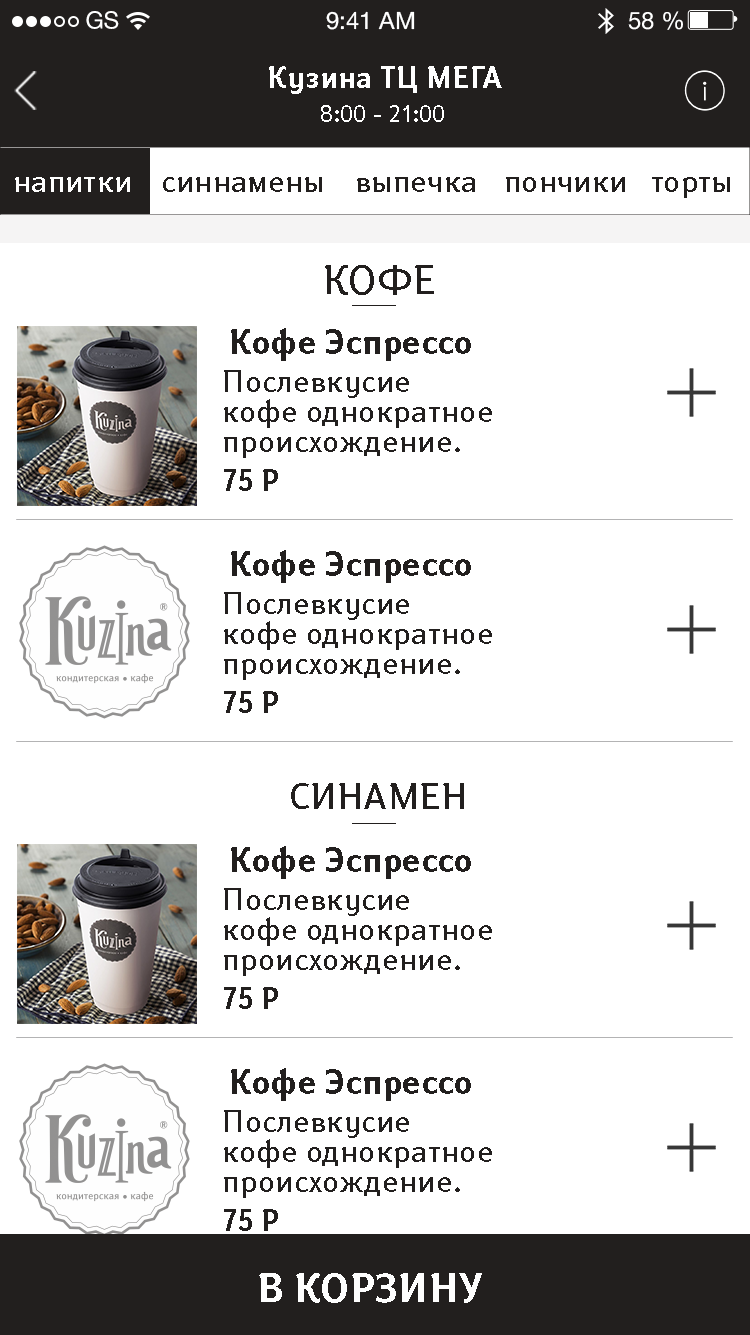
<style>
.page{position:relative;width:750px;height:1335px;background:#ffffff}
.page>*{position:absolute;margin:0}
.t1{font:24px "HelveticaNeueCyr-Roman";color:#ffffff}
.t2{font:30px "SusanBold-Regular";letter-spacing:0.012em;color:#ffffff}
.t3{font:24px "SusanBook-Regular";letter-spacing:0.012em;color:#ffffff}
.t4{font:30px "SusanBook-Regular";letter-spacing:0.012em;color:#fefefe}
.t5{font:30px "SusanBook-Regular";letter-spacing:0.012em;color:#221f1e}
.t6{font:40px "SusanBook-Regular";letter-spacing:0.012em;color:#221f1e}
.t7{font:34px "SusanBold-Regular";letter-spacing:0.012em;color:#221f1e}
.t8{font:30px/30px "SusanBook-Regular";letter-spacing:0.012em;color:#221f1e}
.t9{font:30px "SusanBold-Regular";letter-spacing:0.012em;color:#221f1e}
.t10{font:36px "SusanBook-Regular";letter-spacing:0.012em;color:#221f1e}
.t11{font:40px "SusanBold-Regular";letter-spacing:0.012em;color:#fefefe}
</style>
<div class="page">
<p class="t1" style="left:86px;top:11px;width:33px;height:18px">GS</p>
<p class="t1" style="left:326px;top:11px;width:89px;height:19px">9:41 AM</p>
<p class="t1" style="left:628px;top:11px;width:55px;height:19px">58 %</p>
<p class="t2" style="left:269px;top:66px;width:233px;height:28px">Кузина ТЦ МЕГА</p>
<p class="t3" style="left:321px;top:105px;width:123px;height:17px">8:00 - 21:00</p>
<p class="t4" style="left:15px;top:177px;width:115px;height:15px">напитки</p>
<p class="t5" style="left:163px;top:177px;width:159px;height:15px">синнамены</p>
<p class="t5" style="left:357px;top:177px;width:118px;height:15px">выпечка</p>
<p class="t5" style="left:506px;top:177px;width:119px;height:15px">пончики</p>
<p class="t5" style="left:652px;top:177px;width:78px;height:21px">торты</p>
<p class="t6" style="left:325px;top:265px;width:109px;height:30px">КОФЕ</p>
<p class="t7" style="left:231px;top:328px;width:240px;height:33px">Кофе Эспрессо</p>
<p class="t8" style="left:224px;top:370px;width:268px;height:88px">Послевкусие кофе однократное происхождение.</p>
<p class="t9" style="left:224px;top:469px;width:54px;height:22px">75 Р</p>
<p class="t7" style="left:231px;top:550px;width:240px;height:33px">Кофе Эспрессо</p>
<p class="t8" style="left:224px;top:592px;width:268px;height:88px">Послевкусие кофе однократное происхождение.</p>
<p class="t9" style="left:224px;top:691px;width:54px;height:22px">75 Р</p>
<p class="t10" style="left:291px;top:783px;width:173px;height:26px">СИНАМЕН</p>
<p class="t7" style="left:231px;top:846px;width:240px;height:33px">Кофе Эспрессо</p>
<p class="t8" style="left:224px;top:888px;width:268px;height:88px">Послевкусие кофе однократное происхождение.</p>
<p class="t9" style="left:224px;top:987px;width:54px;height:22px">75 Р</p>
<p class="t7" style="left:231px;top:1068px;width:240px;height:33px">Кофе Эспрессо</p>
<p class="t8" style="left:224px;top:1110px;width:268px;height:88px">Послевкусие кофе однократное происхождение.</p>
<p class="t9" style="left:224px;top:1209px;width:54px;height:22px">75 Р</p>
<p class="t11" style="left:259px;top:1273px;width:223px;height:30px">В КОРЗИНУ</p>
</div>
